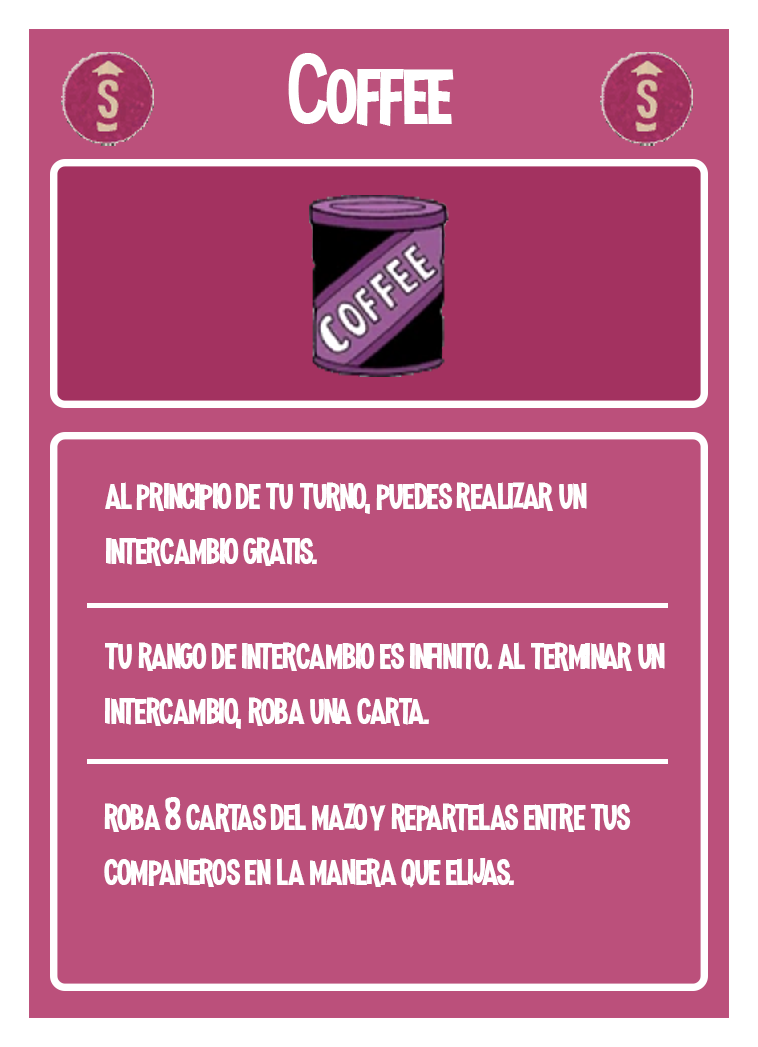
<style>
.page{position:relative;width:758px;height:1047px;background:#bb507b}
.page>*{position:absolute;margin:0}
.t1{font:100px "MadnessHyperactive";color:#ffffff}
.t2{font:45.8px "MadnessHyperactive";color:#ffffff}
</style>
<div class="page">
<p class="t1" style="left:288px;top:53px;width:166px;height:73px">Coffee</p>
<p class="t2" style="left:105px;top:482px;width:482px;height:84px">al principio de tu turno, puedes realizar un intercambio gratis.</p>
<p class="t2" style="left:105px;top:642px;width:560px;height:87px">tu rango de intercambio es infinito. al terminar un<br>intercambio, roba una carta.</p>
<p class="t2" style="left:104px;top:797px;width:527px;height:91px">roba 8 cartas del mazo y repartelas entre tus companeros en la manera que elijas.</p>
</div>
